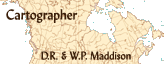
<style>
.page{position:relative;width:164px;height:64px;background:#ffffff}
.page>*{position:absolute;margin:0}
.t1{font:14px "LydianMT";color:#3b1f0a}
.t2{font:11px "LydianMT";color:#3b1f0a}
</style>
<div class="page">
<p class="t1" style="left:6px;top:9px;width:72px;height:14px">Cartographer</p>
<p class="t2" style="left:41px;top:51px;width:90px;height:9px">D.R. &amp; W.P. Maddison</p>
</div>
